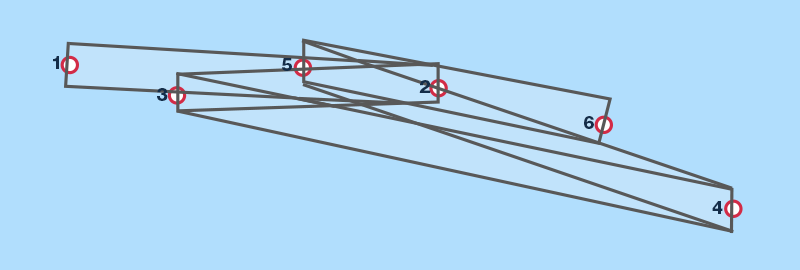
<style>
.page{position:relative;width:800px;height:270px;background:#b1defd}
.page>*{position:absolute;margin:0}
.t1{font:17.9px "HelveticaNeueCyr-Heavy";color:#142d49}
</style>
<div class="page">
<p class="t1" style="left:53px;top:56px;width:6px;height:13px">1</p>
<p class="t1" style="left:282px;top:58px;width:10px;height:13px">5</p>
<p class="t1" style="left:157px;top:88px;width:11px;height:13px">3</p>
<p class="t1" style="left:419px;top:80px;width:12px;height:13px">2</p>
<p class="t1" style="left:584px;top:116px;width:10px;height:13px">6</p>
<p class="t1" style="left:712px;top:201px;width:11px;height:13px">4</p>
</div>
